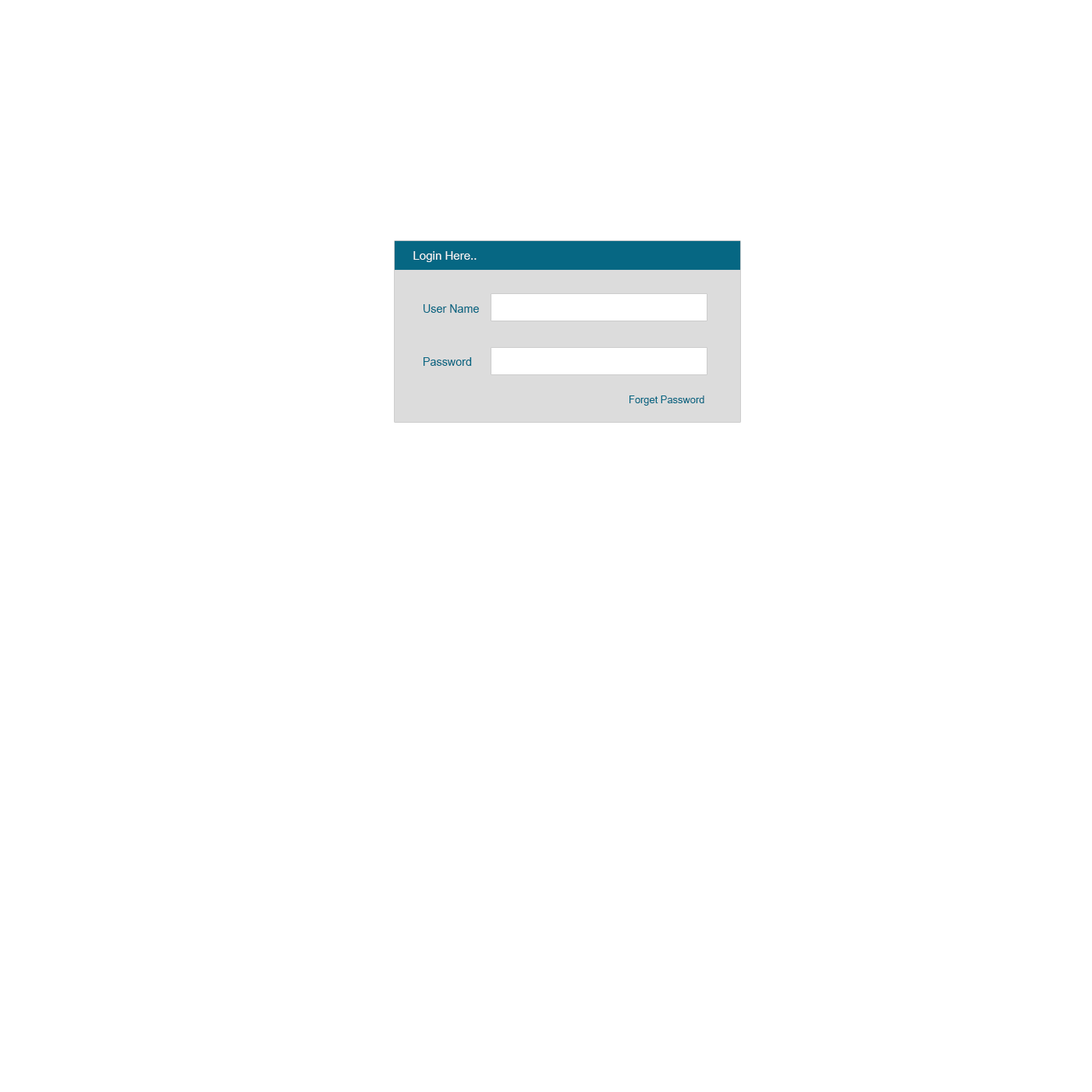
<style>
.page{position:relative;width:1092px;height:1092px;background:#ffffff}
.page>*{position:absolute;margin:0}
.t1{font:16.4px "Utsaah";color:#f6f6f6}
.t2{font:15.6px "Utsaah";color:#066783}
.t3{font:14px "Utsaah";color:#066783}
</style>
<div class="page">
<p class="t1" style="left:413px;top:251px;width:64px;height:11px">Login Here..</p>
<p class="t2" style="left:424px;top:304px;width:55px;height:9px">User Name</p>
<p class="t2" style="left:424px;top:357px;width:48px;height:9px">Password</p>
<p class="t3" style="left:629px;top:395px;width:75px;height:11px">Forget Password</p>
</div>
